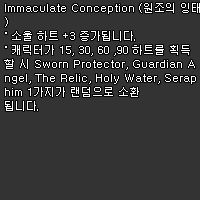
<style>
.page{position:relative;width:200px;height:200px;background:#333333}
.page>*{position:absolute;margin:0}
.t1{font:11px/14px "Dotum";color:#ffffff}
</style>
<div class="page">
<p class="t1" style="left:4px;top:3px;width:196px;height:108px">Immaculate Conception (원조의 잉태<br>)<br>˚ 소울 하트 +3 증가됩니다.<br>˚ 캐릭터가 15, 30, 60 ,90 하트를 획득<br>할 시 Sworn Protector, Guardian A<br>ngel, The Relic, Holy Water, Serap<br>him 1가지가 랜덤으로 소환<br>됩니다.</p>
</div>
